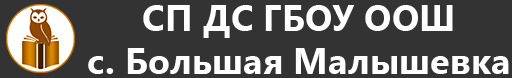
<style>
.page{position:relative;width:512px;height:78px;background:#333333}
.page>*{position:absolute;margin:0}
.t1{font:36.3px "SegoeUI-Bold";color:#ffffff}
</style>
<div class="page">
<p class="t1" style="left:88px;top:5px;width:421px;height:69px;text-align:center">СП ДС ГБОУ ООШ<br>с. Большая Малышевка</p>
</div>
